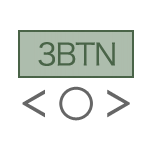
<style>
.page{position:relative;width:152px;height:152px;background:#ffffff}
.page>*{position:absolute;margin:0}
.t1{font:30px "HiraKakuPro-W3";letter-spacing:-0.03em;color:#496448}
.t2{font:48px "HiraKakuPro-W3";letter-spacing:0.05em;color:#666666}
</style>
<div class="page">
<p class="t1" style="left:38px;top:42px;width:77px;height:24px">3BTN</p>
<p class="t2" style="left:22px;top:89px;width:108px;height:29px">&lt;     &gt;</p>
</div>
